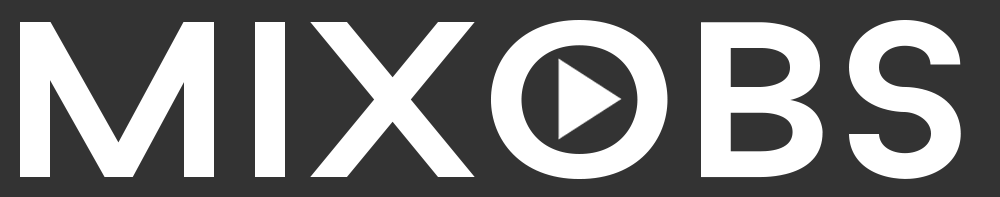
<style>
.page{position:relative;width:1000px;height:197px;background:#333333}
.page>*{position:absolute;margin:0}
.t1{font:221.1px "BaronNeue";color:#ffffff;scale:1.16 1}
</style>
<div class="page">
<p class="t1" style="left:20px;top:20px;width:941px;height:159px">mixobs</p>
</div>
